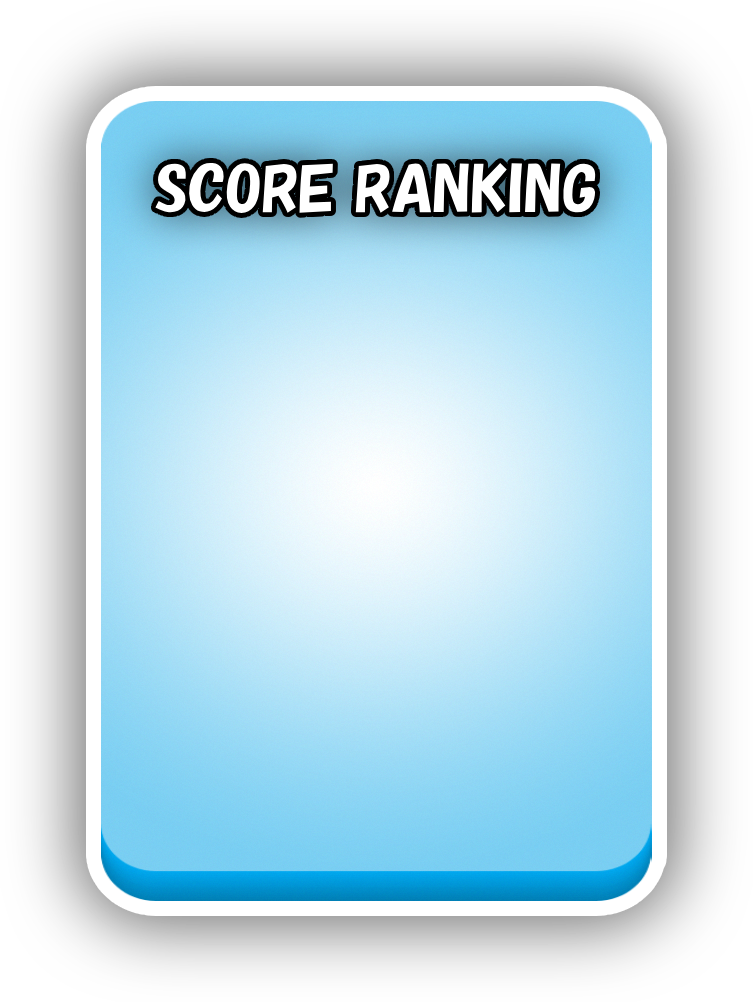
<style>
.page{position:relative;width:753px;height:1002px}
.page>*{position:absolute;margin:0}
.t1{font:60px "HGPSoeiKakupoptai";color:#ffffff}
</style>
<div class="page">
<p class="t1" style="left:155px;top:162px;width:442px;height:52px">SCORE RANKING</p>
</div>
